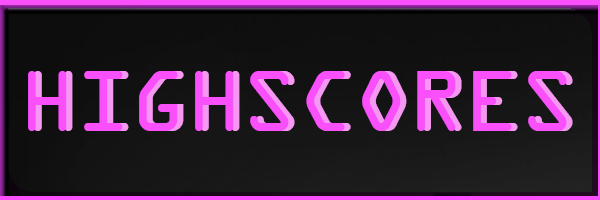
<style>
.page{position:relative;width:600px;height:200px}
.page>*{position:absolute;margin:0}
.t1{font:92px "OCRAExtended";color:#f950fb}
.t2{font:92px "OCRAExtended"}
</style>
<div class="page">
<p class="t1" style="left:28px;top:71px;width:539px;height:60px">HIGHSCORES</p>
<p class="t2" style="left:34px;top:71px;width:539px;height:60px">HIGHSCORES</p>
</div>
